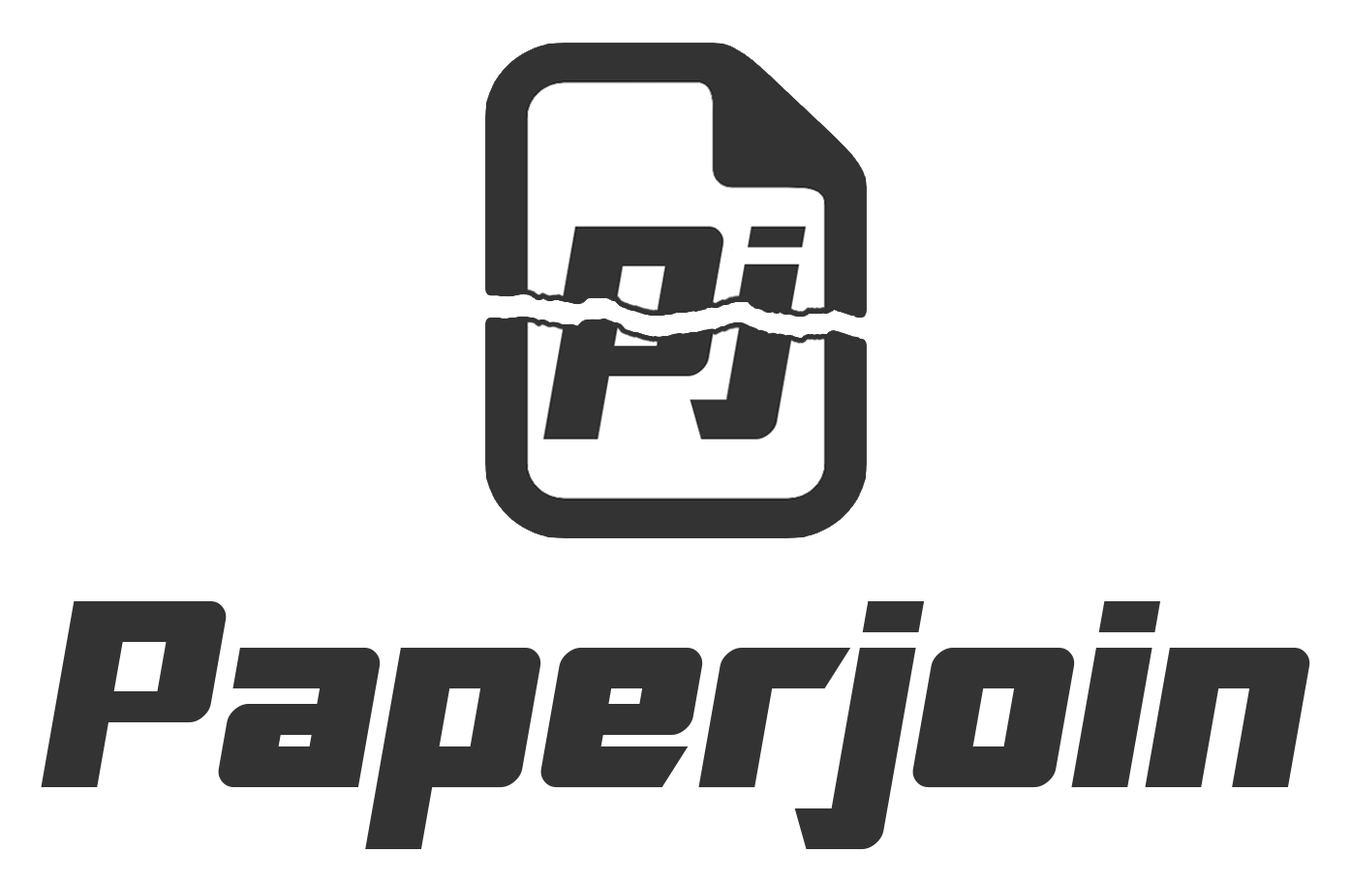
<style>
.page{position:relative;width:1351px;height:883px;background:#ffffff}
.page>*{position:absolute;margin:0}
.t1{font:310px "SFTransRobotics";color:#333333;font-style:italic}
</style>
<div class="page">
<p class="t1" style="left:41px;top:601px;width:1269px;height:248px">Paperjoin</p>
</div>
